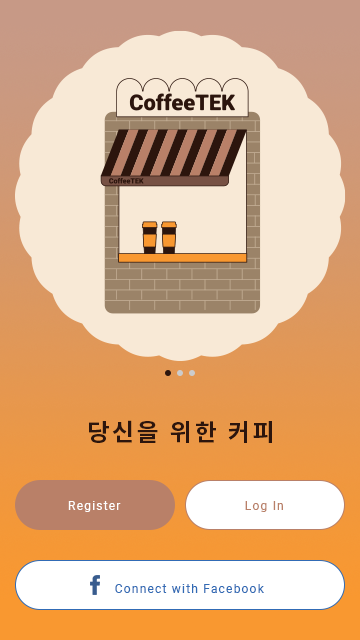
<style>
.page{position:relative;width:360px;height:640px;background:#f8e9d6}
.page>*{position:absolute;margin:0}
.t1{font:24px "NotoSansKR-Bold";letter-spacing:0.1em;color:#2c150d}
.t2{font:12px "Roboto-Regular";letter-spacing:0.1em;color:#ffffff}
.t3{font:12px "Roboto-Regular";letter-spacing:0.1em;color:#b98068}
.t4{font:12px "Roboto-Regular";letter-spacing:0.1em;color:#316bb5}
</style>
<div class="page">
<p class="t1" style="left:89px;top:420px;width:183px;height:23px">당신을 위한 커피</p>
<p class="t2" style="left:68px;top:501px;width:53px;height:11px">Register</p>
<p class="t3" style="left:245px;top:501px;width:38px;height:11px">Log In</p>
<p class="t4" style="left:115px;top:584px;width:149px;height:9px">Connect with Facebook</p>
</div>
